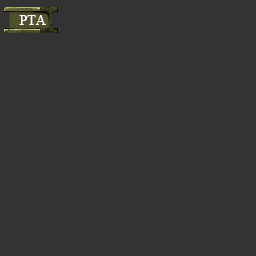
<style>
.page{position:relative;width:256px;height:256px;background:#333333}
.page>*{position:absolute;margin:0}
.t1{font:14px "TimesNewRomanPSMT";color:#ffffff}
</style>
<div class="page">
<p class="t1" style="left:19px;top:15px;width:27px;height:10px">PTA</p>
</div>
